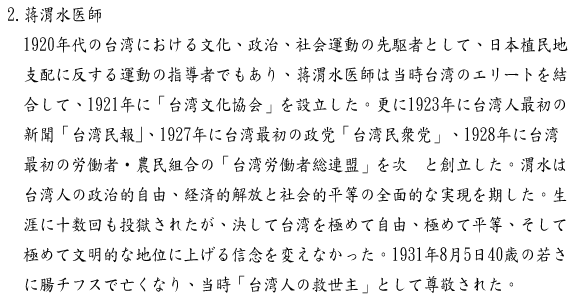
<style>
.page{position:relative;width:576px;height:304px;background:#ffffff}
.page>*{position:absolute;margin:0}
.t1{font:18px/30px "DFKaiShu-SB-Estd-BF";color:#060606;scale:0.89 1}
</style>
<div class="page">
<p class="t1" style="left:8px;top:6px;width:560px;height:288px">2.蒋渭水医師<br>  1920年代の台湾における文化、政治、社会運動の先駆者として、日本植民地<br>  支配に反する運動の指導者でもあり、蒋渭水医師は当時台湾のエリートを結<br>  合して、1921年に「台湾文化協会」を設立した。更に1923年に台湾人最初の<br>  新聞「台湾民報｣、1927年に台湾最初の政党「台湾民衆党」、1928年に台湾<br>  最初の労働者・農民組合の「台湾労働者総連盟」を次々と創立した。渭水は<br>  台湾人の政治的自由、経済的解放と社会的平等の全面的な実現を期した。生<br>  涯に十数回も投獄されたが、決して台湾を極めて自由、極めて平等、そして<br>  極めて文明的な地位に上げる信念を変えなかった。1931年8月5日40歳の若さ<br>  に腸チフスで亡くなり、当時「台湾人の救世主」として尊敬された。</p>
</div>
